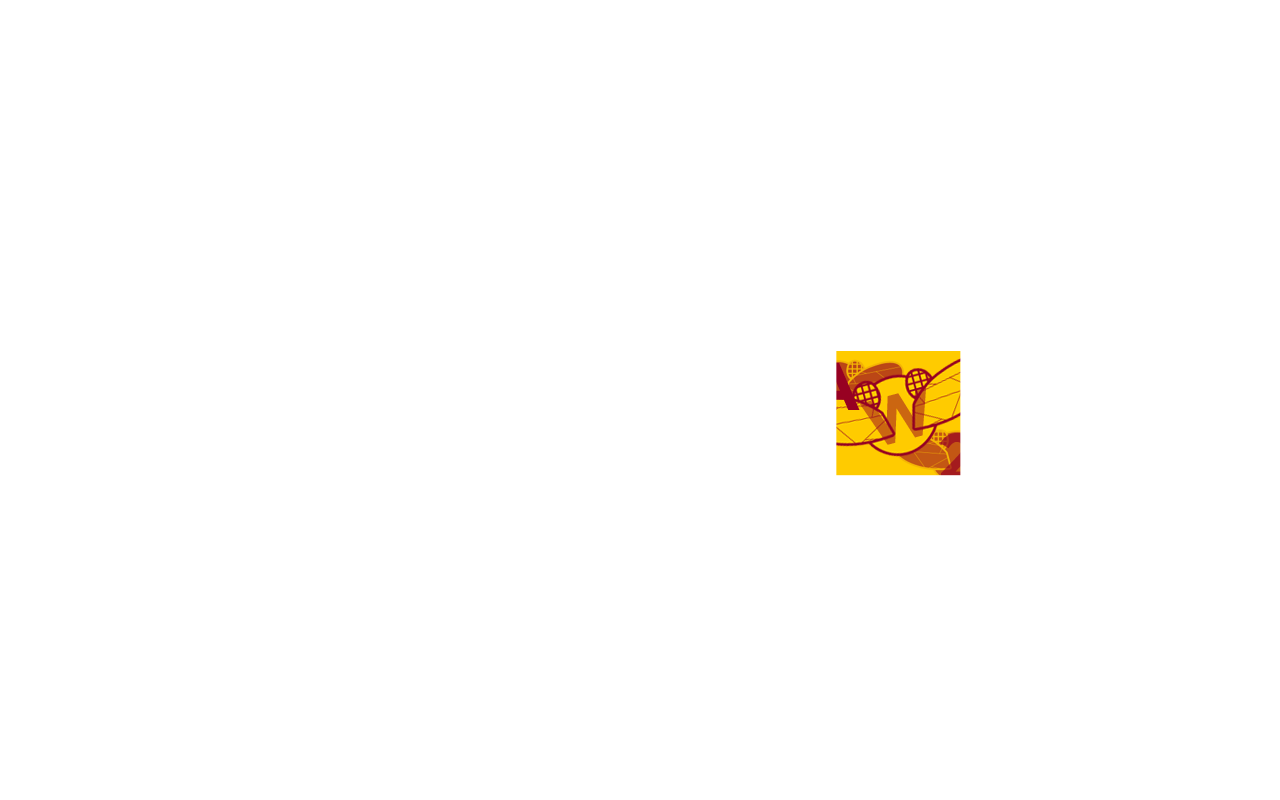
<style>
.page{position:relative;width:1280px;height:800px;background:#ffffff}
.page>*{position:absolute;margin:0}
.t1{font:67.2px "Montserrat-Bold";color:#cb6611}
</style>
<div class="page">
<p class="t1" style="left:859px;top:385px;width:68px;height:60px;rotate:-15deg">W</p>
</div>
